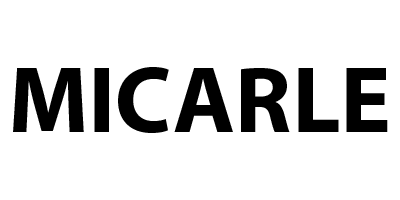
<style>
.page{position:relative;width:400px;height:200px;background:#ffffff}
.page>*{position:absolute;margin:0}
.t1{font:95px "MyriadPro-Bold";color:#000000}
</style>
<div class="page">
<p class="t1" style="left:13px;top:67px;width:375px;height:66px">MICARLE</p>
</div>
